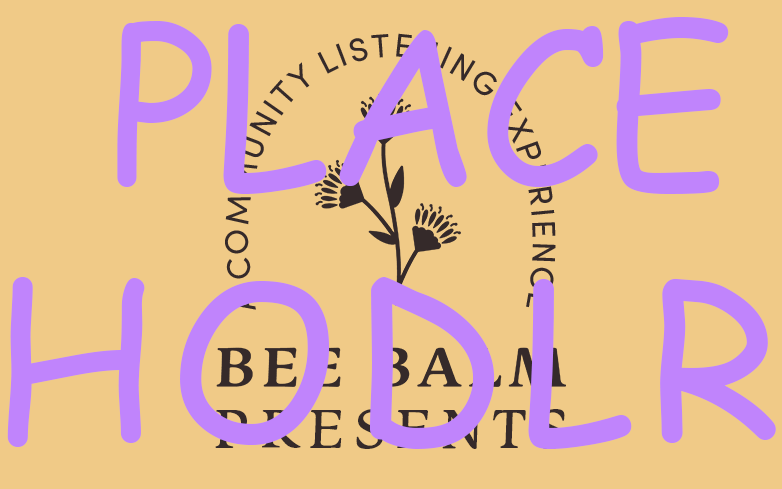
<style>
.page{position:relative;width:782px;height:489px;background:#f0ca87}
.page>*{position:absolute;margin:0}
.t1{font:213px "ComicSansMS";letter-spacing:-0.02em;color:#c084fc}
.t2{font:213px "ComicSansMS";color:#c084fc}
.t3{font:213px "ComicSansMS";letter-spacing:0.06em;color:#c084fc}
.t4{font:33px "SofiaPro";letter-spacing:0.06em;color:#352a2a}
.t5{font:58px "Monarcha";letter-spacing:0.175em}
</style>
<div class="page">
<p class="t1" style="left:7px;top:17px;width:769px;height:432px"><span class="t2">  </span>PLACE       <span class="t3">HODLR</span></p>
<p class="t4" style="left:225px;top:33px;width:331px;height:278px;text-align:justify">A COMMUNITY LISTENING EXPERIENCE</p>
<p class="t5" style="left:215px;top:409px;width:350px;height:40px">PRESENTS</p>
</div>
